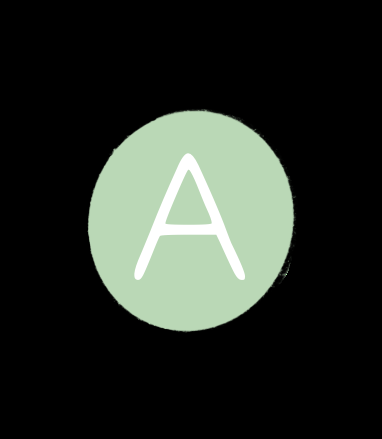
<style>
.page{position:relative;width:382px;height:439px;background:#000000}
.page>*{position:absolute;margin:0}
.t1{font:255.4px "Effy-Regular";color:#ffffff;scale:1.11 1}
</style>
<div class="page">
<p class="t1" style="left:0px;top:0px;width:382px;height:439px;text-align:center">A</p>
</div>
